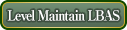
<style>
.page{position:relative;width:127px;height:30px}
.page>*{position:absolute;margin:0}
.t1{font:14px "RyuminPro-ExBold";letter-spacing:-0.08em;color:#ffffff;scale:0.9 1}
</style>
<div class="page">
<p class="t1" style="left:7px;top:10px;width:113px;height:11px">Level Maintain LBAS</p>
</div>
